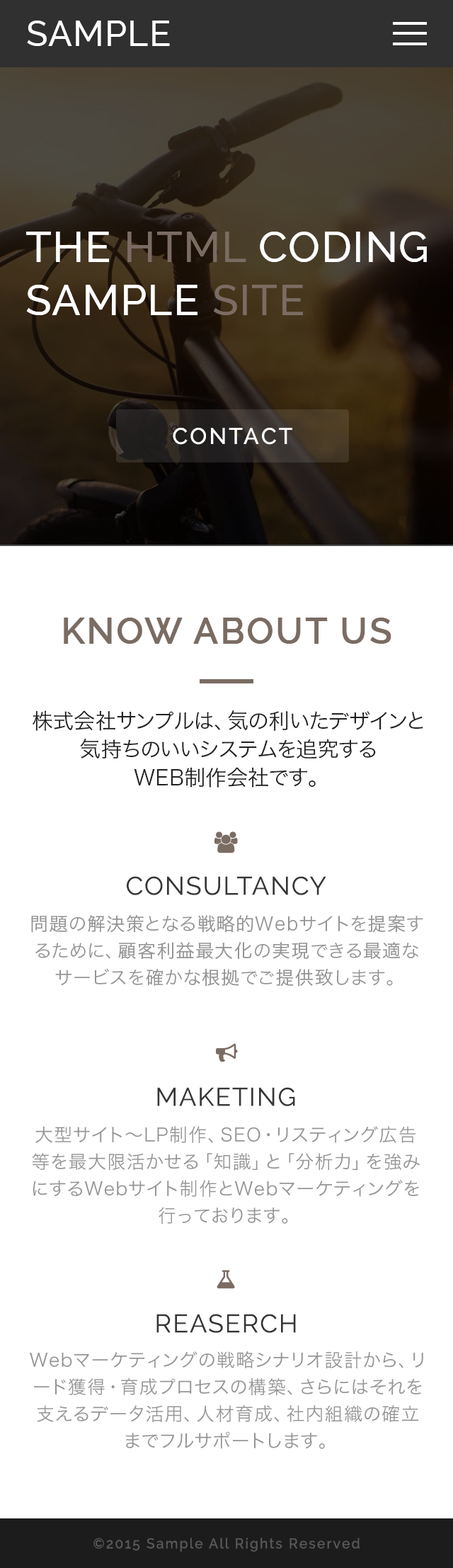
<style>
.page{position:relative;width:453px;height:1568px;background:#ffffff}
.page>*{position:absolute;margin:0}
.t1{font:35.4px "Raleway-Medium";letter-spacing:0.025em;color:#ffffff;text-transform:uppercase}
.t2{font:42.5px/53.1px "Raleway-Medium";letter-spacing:0.025em;color:#ffffff;text-transform:uppercase}
.t3{font:42.5px/53.1px "Raleway-Medium";letter-spacing:0.025em;color:#7b6c63;text-transform:uppercase}
.t4{font:22.7px "Raleway-Medium";letter-spacing:0.1em;color:#ffffff;text-transform:uppercase}
.t5{font:35.4px "Raleway-Medium";letter-spacing:0.05em;color:#7b6c63;text-transform:uppercase;font-weight:bold}
.t6{font:21.2px/28.3px "HiraKakuPro-W3";color:#212121}
.t7{font:25.5px "Raleway";letter-spacing:0.05em;color:#363636;text-transform:uppercase}
.t8{font:18.4px/26.9px "HiraKakuPro-W3";letter-spacing:0.05em;color:#949494}
.t9{font:14.2px "Raleway-Medium";letter-spacing:0.11em;color:#595959;scale:0.96 1}
</style>
<div class="page">
<p class="t1" style="left:27px;top:21px;width:143px;height:25px">SAMPLE</p>
<p class="t2" style="left:26px;top:232px;width:401px;height:83px">The <span class="t3">HTML </span>CODING<br>SAMPLE <span class="t3">SITE</span></p>
<p class="t4" style="left:173px;top:428px;width:119px;height:17px">CONTACT</p>
<p class="t5" style="left:64px;top:618px;width:328px;height:26px">Know About Us</p>
<p class="t6" style="left:33px;top:710px;width:391px;height:78px;text-align:center">株式会社サンプルは、気の利いたデザインと<br>気持ちのいいシステムを追究する<br>WEB制作会社です。</p>
<p class="t7" style="left:127px;top:876px;width:199px;height:19px">ConsulTancy</p>
<p class="t8" style="left:31px;top:914px;width:393px;height:73px;text-align:center">問題の解決策となる戦略的Webサイトを提案するために、顧客利益最大化の実現できる最適なサービスを確かな根拠でご提供致します。</p>
<p class="t7" style="left:157px;top:1087px;width:138px;height:19px">Maketing</p>
<p class="t8" style="left:32px;top:1126px;width:388px;height:98px;text-align:center">大型サイト～LP制作、SEO・リスティング広告等を最大限活かせる「知識」と「分析力」を強みにするWebサイト制作とWebマーケティングを行っております。</p>
<p class="t7" style="left:157px;top:1314px;width:139px;height:19px">Reaserch</p>
<p class="t8" style="left:29px;top:1351px;width:395px;height:98px;text-align:center">Webマーケティングの戦略シナリオ設計から、リード獲得・育成プロセスの構築、さらにはそれを支えるデータ活用、人材育成、社内組織の確立までフルサポートします。</p>
<p class="t9" style="left:93px;top:1538px;width:267px;height:14px">©2015 Sample All Rights Reserved</p>
</div>
